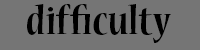
<style>
.page{position:relative;width:200px;height:50px;background:#757575}
.page>*{position:absolute;margin:0}
.t1{font:44px "NuevaStd-BoldCond";color:#000000}
</style>
<div class="page">
<p class="t1" style="left:27px;top:4px;width:144px;height:39px">difficulty</p>
</div>
